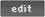
<style>
.page{position:relative;width:45px;height:17px}
.page>*{position:absolute;margin:0}
.t1{font:8px "FFFAquarius";letter-spacing:0.01em;color:#efefef;font-weight:bold}
</style>
<div class="page">
<p class="t1" style="left:11px;top:5px;width:21px;height:7px">edit</p>
</div>
